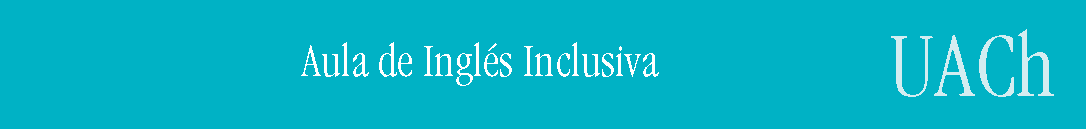
<style>
.page{position:relative;width:1086px;height:129px;background:#00b2c5}
.page>*{position:absolute;margin:0}
.t1{font:96px "GaramondITCbyBT-LightCondensed";color:#d4edf1}
.t2{font:48px "GaramondITCbyBT-LightCondensed";color:#ffffff}
</style>
<div class="page">
<p class="t1" style="left:891px;top:29px;width:163px;height:68px">UACh</p>
<p class="t2" style="left:301px;top:42px;width:358px;height:44px">Aula de Inglés Inclusiva</p>
</div>
